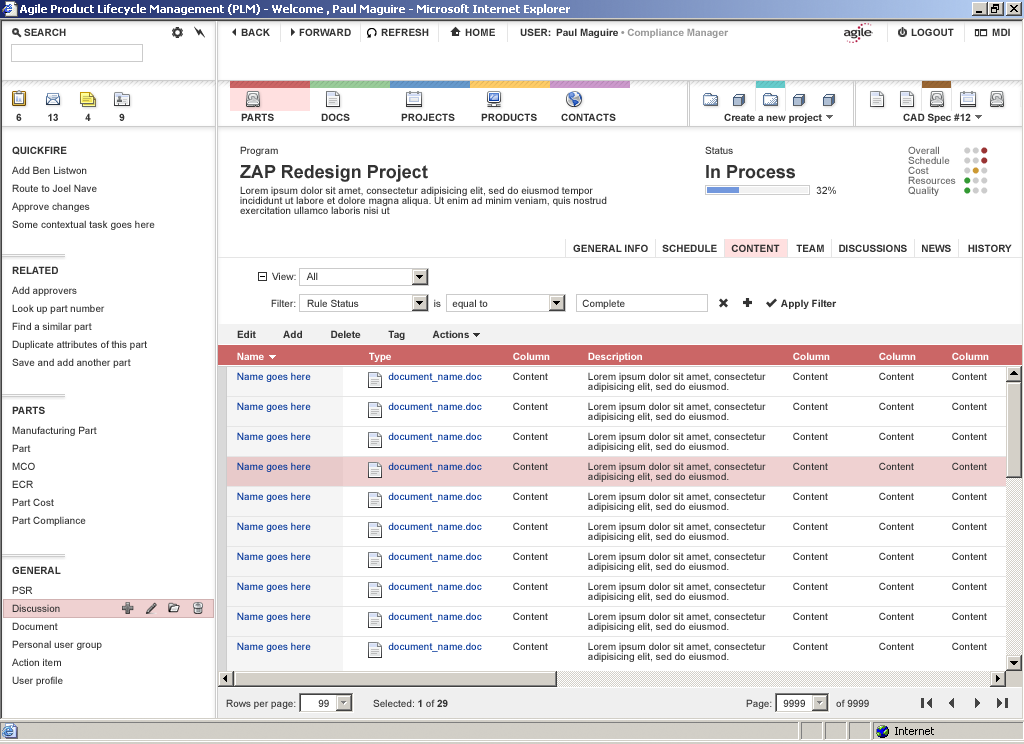
<style>
.page{position:relative;width:1024px;height:744px;background:#ffffff}
.page>*{position:absolute;margin:0}
.t1{font:10px "Arial-BoldMT";color:#333333}
.t2{font:10px "Arial-BoldMT";color:#999999}
.t3{font:10px/10px "ArialMT";color:#333333}
.t4{font:18px/18px "Arial-BoldMT";color:#333333}
.t5{font:10px/10px "ArialMT";color:#666666}
.t6{font:24px/10px "ArialMT";color:#cccccc}
.t7{font:24px/10px "ArialMT";color:#993333}
.t8{font:24px/10px "ArialMT";color:#cc9933}
.t9{font:24px/10px "ArialMT";color:#339933}
.t10{font:10px/18px "ArialMT";color:#333333}
.t11{font:10px "ArialMT";color:#333333}
.t12{font:10px/10px "ArialMT";color:#003399}
.t13{font:10px "Arial-BoldMT";color:#ffffff}
.t14{font:10px/8px "Arial-BoldMT";color:#ffffff}
</style>
<div class="page">
<p class="t1" style="left:24px;top:28px;width:42px;height:8px">SEARCH</p>
<p class="t1" style="left:241px;top:28px;width:29px;height:8px">BACK</p>
<p class="t1" style="left:299px;top:28px;width:52px;height:8px">FORWARD</p>
<p class="t1" style="left:381px;top:28px;width:48px;height:8px">REFRESH</p>
<p class="t1" style="left:465px;top:28px;width:30px;height:8px">HOME</p>
<p class="t2" style="left:520px;top:28px;width:209px;height:10px"><span class="t1">USER: Paul Maguire </span>• Compliance Manager</p>
<p class="t1" style="left:911px;top:28px;width:43px;height:8px">LOGOUT</p>
<p class="t1" style="left:992px;top:28px;width:18px;height:8px">MDI</p>
<p class="t1" style="left:16px;top:113px;width:6px;height:8px">6</p>
<p class="t1" style="left:48px;top:113px;width:10px;height:8px">13</p>
<p class="t1" style="left:85px;top:113px;width:6px;height:8px">4</p>
<p class="t1" style="left:119px;top:113px;width:6px;height:8px">9</p>
<p class="t1" style="left:241px;top:113px;width:33px;height:8px">PARTS</p>
<p class="t1" style="left:321px;top:113px;width:29px;height:8px">DOCS</p>
<p class="t1" style="left:401px;top:113px;width:54px;height:8px">PROJECTS</p>
<p class="t1" style="left:481px;top:113px;width:56px;height:8px">PRODUCTS</p>
<p class="t1" style="left:561px;top:113px;width:55px;height:8px">CONTACTS</p>
<p class="t1" style="left:724px;top:113px;width:98px;height:10px">Create a new project</p>
<p class="t1" style="left:903px;top:113px;width:68px;height:10px">CAD Spec #12</p>
<p class="t1" style="left:12px;top:146px;width:55px;height:9px">QUICKFIRE</p>
<p class="t3" style="left:240px;top:146px;width:367px;height:68px">Program<br><span class="t4">ZAP Redesign Project<br></span>Lorem ipsum dolor sit amet, consectetur adipisicing elit, sed do eiusmod tempor<br>incididunt ut labore et dolore magna aliqua. Ut enim ad minim veniam, quis nostrud<br>exercitation ullamco laboris nisi ut</p>
<p class="t4" style="left:705px;top:146px;width:131px;height:48px"><span class="t3">Status<br></span>In Process<br>    <span class="t3">32%</span></p>
<p class="t5" style="left:908px;top:146px;width:48px;height:50px">Overall<br>Schedule<br>Cost<br>Resources<br>Quality</p>
<p class="t6" style="left:964px;top:147px;width:24px;height:47px">••<span class="t7">•<br></span>••<span class="t7">•<br></span>•<span class="t8">•</span>•<br><span class="t9">•</span>••<br><span class="t9">•</span>••</p>
<p class="t10" style="left:12px;top:166px;width:143px;height:64px">Add Ben Listwon<br>Route to Joel Nave<br>Approve changes<br>Some contextual task goes here</p>
<p class="t1" style="left:573px;top:244px;width:439px;height:8px">GENERAL INFO     SCHEDULE     CONTENT      TEAM     DISCUSSIONS     NEWS      HISTORY</p>
<p class="t1" style="left:12px;top:266px;width:46px;height:8px">RELATED</p>
<p class="t11" style="left:272px;top:272px;width:46px;height:8px">View:    All</p>
<p class="t10" style="left:12px;top:286px;width:135px;height:82px">Add approvers<br>Look up part number<br>Find a similar part<br>Duplicate attributes of this part<br>Save and add another part</p>
<p class="t11" style="left:271px;top:299px;width:354px;height:10px">Filter:    Rule Status                           is    equal to                                  Complete</p>
<p class="t1" style="left:781px;top:299px;width:56px;height:10px">Apply Filter</p>
<p class="t1" style="left:237px;top:330px;width:232px;height:10px">Edit          Add          Delete          Tag          Actions</p>
<p class="t12" style="left:237px;top:352px;width:74px;height:300px"><span class="t13">N</span><span class="t14">ame<br><br></span>Name goes here<br><br><br>Name goes here<br><br><br>Name goes here<br><br><br>Name goes here<br><br><br>Name goes here<br><br><br>Name goes here<br><br><br>Name goes here<br><br><br>Name goes here<br><br><br>Name goes here<br><br><br>Name goes here</p>
<p class="t12" style="left:369px;top:352px;width:113px;height:300px"><span class="t13">Type<br><br></span>       document_name.doc<br><br><br>       document_name.doc<br><br><br>       document_name.doc<br><br><br>       document_name.doc<br><br> <br>       document_name.doc<br><br><br>       document_name.doc<br><br><br>       document_name.doc<br><br><br>       document_name.doc<br><br><br>       document_name.doc<br><br><br>       document_name.doc</p>
<p class="t3" style="left:513px;top:352px;width:37px;height:298px"><span class="t13">Column<br></span><br>Content<br><br><br>Content<br><br><br>Content<br><br><br>Content<br><br><br>Content<br><br><br>Content<br><br><br>Content<br><br><br>Content<br><br><br>Content<br><br><br>Content</p>
<p class="t3" style="left:588px;top:352px;width:178px;height:310px"><span class="t13">De</span><span class="t14">scription<br></span><br>Lorem ipsum dolor sit amet, consectetur <br>adipisicing elit, sed do eiusmod.<br><br>Lorem ipsum dolor sit amet, consectetur <br>adipisicing elit, sed do eiusmod.<br><br>Lorem ipsum dolor sit amet, consectetur <br>adipisicing elit, sed do eiusmod.<br><br>Lorem ipsum dolor sit amet, consectetur <br>adipisicing elit, sed do eiusmod.<br><br>Lorem ipsum dolor sit amet, consectetur <br>adipisicing elit, sed do eiusmod.<br><br>Lorem ipsum dolor sit amet, consectetur <br>adipisicing elit, sed do eiusmod.<br><br>Lorem ipsum dolor sit amet, consectetur <br>adipisicing elit, sed do eiusmod.<br><br>Lorem ipsum dolor sit amet, consectetur <br>adipisicing elit, sed do eiusmod.<br><br>Lorem ipsum dolor sit amet, consectetur <br>adipisicing elit, sed do eiusmod.<br><br>Lorem ipsum dolor sit amet, consectetur <br>adipisicing elit, sed do eiusmod.</p>
<p class="t3" style="left:793px;top:352px;width:37px;height:298px"><span class="t13">Column<br></span><br>Content<br><br><br>Content<br><br><br>Content<br><br><br>Content<br><br><br>Content<br><br><br>Content<br><br><br>Content<br><br><br>Content<br><br><br>Content<br><br><br>Content</p>
<p class="t3" style="left:879px;top:352px;width:37px;height:298px"><span class="t13">Column<br><br></span>Content<br><br><br>Content<br><br><br>Content<br><br><br>Content<br><br><br>Content<br><br><br>Content<br><br><br>Content<br><br><br>Content<br><br><br>Content<br><br><br>Content</p>
<p class="t3" style="left:952px;top:352px;width:37px;height:298px"><span class="t13">Column<br></span><br>Content<br><br><br>Content<br><br><br>Content<br><br><br>Content<br><br><br>Content<br><br><br>Content<br><br><br>Content<br><br><br>Content<br><br><br>Content<br><br><br>Content</p>
<p class="t1" style="left:12px;top:406px;width:33px;height:8px">PARTS</p>
<p class="t10" style="left:12px;top:426px;width:85px;height:100px">Manufacturing Part<br>Part<br>MCO<br>ECR<br>Part Cost<br>Part Compliance</p>
<p class="t1" style="left:12px;top:566px;width:49px;height:8px">GENERAL</p>
<p class="t10" style="left:12px;top:586px;width:90px;height:100px">PSR<br>Discussion<br>Document<br>Personal user group<br>Action item<br>User profile</p>
<p class="t11" style="left:226px;top:699px;width:103px;height:10px">Rows per page:        99</p>
<p class="t11" style="left:373px;top:699px;width:75px;height:8px">Selected: <span class="t1">1</span> of <span class="t1">29</span></p>
<p class="t11" style="left:746px;top:699px;width:123px;height:10px">Page:    9999           of 9999</p>
</div>
